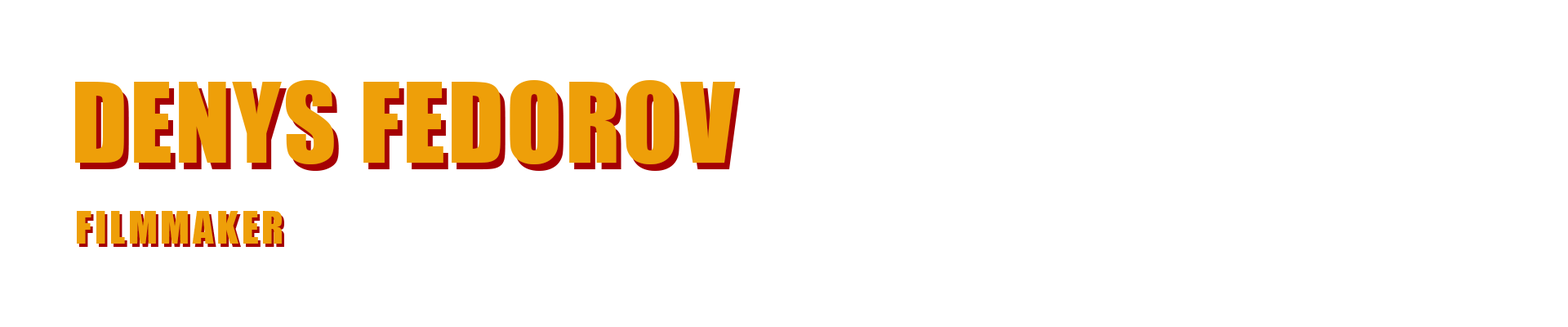
<style>
.page{position:relative;width:1568px;height:327px;background:#ffffff}
.page>*{position:absolute;margin:0}
.t1{font:102.1px "Impact";letter-spacing:0.025em;color:#ee9f09;text-transform:uppercase}
.t2{font:40.8px "Impact";letter-spacing:0.075em;color:#ee9f09;text-transform:uppercase}
.t3{font:40.8px "Impact";letter-spacing:0.075em;text-transform:uppercase}
</style>
<div class="page">
<p class="t1" style="left:75px;top:80px;width:661px;height:84px">denys fedorov</p>
<p class="t1" style="left:80px;top:87px;width:661px;height:84px">denys fedorov</p>
<p class="t2" style="left:77px;top:211px;width:205px;height:32px">filmmaker</p>
<p class="t3" style="left:79px;top:214px;width:205px;height:33px">filmmaker</p>
</div>
